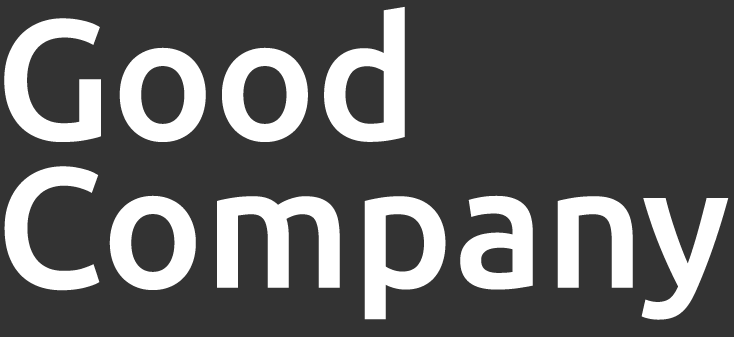
<style>
.page{position:relative;width:734px;height:337px;background:#333333}
.page>*{position:absolute;margin:0}
.t1{font:170.8px "Ubuntu-Medium";color:#ffffff}
</style>
<div class="page">
<p class="t1" style="left:4px;top:6px;width:401px;height:136px">Good</p>
<p class="t1" style="left:4px;top:166px;width:725px;height:154px">Company</p>
</div>
